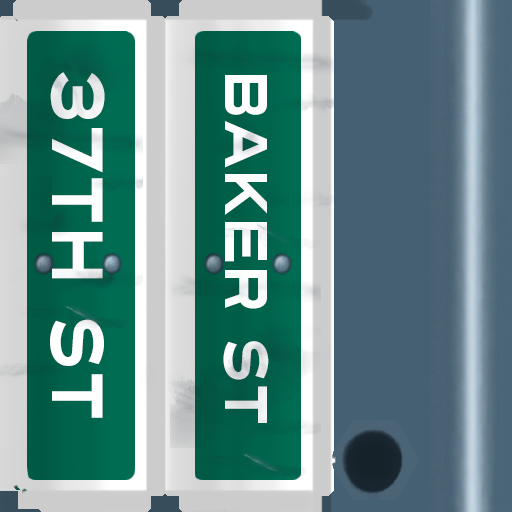
<style>
.page{position:relative;width:512px;height:512px}
.page>*{position:absolute;margin:0}
.t1{font:72px "Turnpike";color:#fefeff;scale:0.75 1}
.t2{font:60px "Turnpike";color:#fefeff;scale:0.75 1}
</style>
<div class="page">
<p class="t1" style="left:50px;top:72px;width:55px;height:346px;rotate:90deg">37th st</p>
<p class="t2" style="left:223px;top:75px;width:46px;height:348px;rotate:90deg">Baker St</p>
</div>
